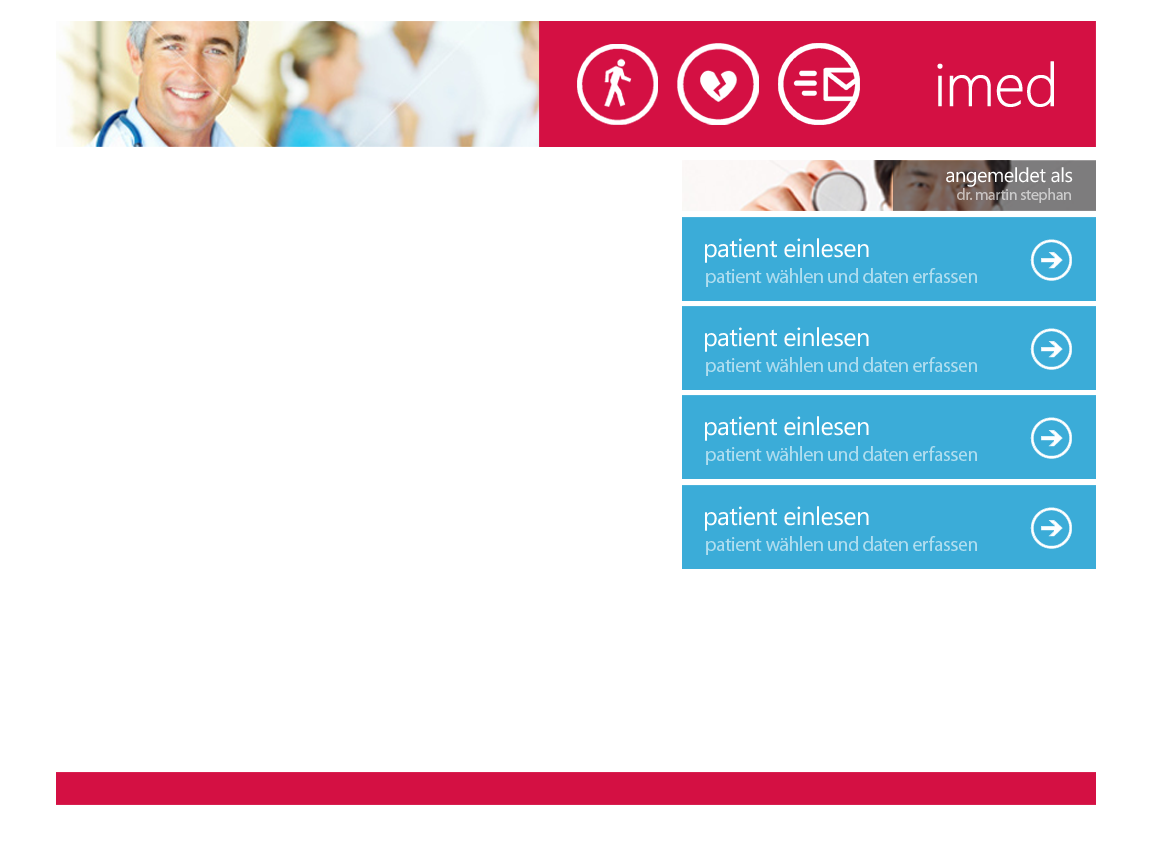
<style>
.page{position:relative;width:1152px;height:864px;background:#ffffff}
.page>*{position:absolute;margin:0}
.t1{font:60px "SegoeWP-Light";letter-spacing:-0.01em;color:#ffffff;font-weight:bold}
.t2{font:20px "SegoeWP";letter-spacing:-0.025em;color:#ffffff}
.t3{font:16px "MyriadPro-Regular";letter-spacing:-0.025em;color:#cbcbcb}
.t4{font:25.3px "SegoeWP";letter-spacing:-0.025em;color:#ffffff}
.t5{font:20px "MyriadPro-Regular";letter-spacing:-0.025em;color:#b1deef}
</style>
<div class="page">
<p class="t1" style="left:937px;top:61px;width:117px;height:46px">imed</p>
<p class="t2" style="left:946px;top:167px;width:127px;height:20px">angemeldet als</p>
<p class="t3" style="left:957px;top:188px;width:114px;height:15px">dr. martin stephan</p>
<p class="t4" style="left:705px;top:238px;width:164px;height:25px">patient einlesen</p>
<p class="t5" style="left:706px;top:268px;width:271px;height:19px">patient wählen und daten erfassen</p>
<p class="t4" style="left:705px;top:327px;width:164px;height:25px">patient einlesen</p>
<p class="t5" style="left:706px;top:357px;width:271px;height:19px">patient wählen und daten erfassen</p>
<p class="t4" style="left:705px;top:416px;width:164px;height:25px">patient einlesen</p>
<p class="t5" style="left:706px;top:446px;width:271px;height:19px">patient wählen und daten erfassen</p>
<p class="t4" style="left:705px;top:506px;width:164px;height:25px">patient einlesen</p>
<p class="t5" style="left:706px;top:536px;width:271px;height:19px">patient wählen und daten erfassen</p>
</div>
